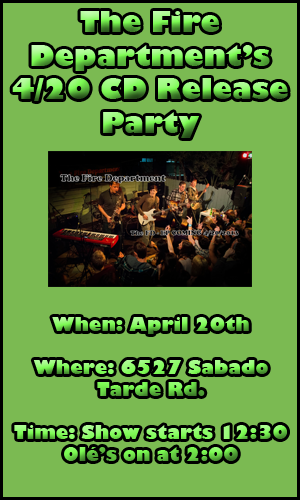
<style>
.page{position:relative;width:300px;height:500px;background:#7bba52}
.page>*{position:absolute;margin:0}
.t1{font:28px "GillSans-UltraBold"}
.t2{font:18px "GillSans-UltraBold"}
</style>
<div class="page">
<p class="t1" style="left:12px;top:11px;width:276px;height:127px;text-align:center">The Fire<br>Department’s<br>4/20 CD Release<br>Party</p>
<p class="t2" style="left:14px;top:317px;width:273px;height:144px;text-align:center">When: April 20th<br><br>Where: 6527 Sabado<br>Tarde Rd.<br><br>Time: Show starts 12:30<br>Olé’s on at 2:00</p>
</div>
